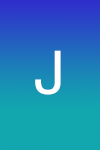
<style>
.page{position:relative;width:100px;height:150px}
.page>*{position:absolute;margin:0}
.t1{font:60px "HelveticaNeue";color:#ffffff}
</style>
<div class="page">
<p class="t1" style="left:35px;top:50px;width:26px;height:45px">J</p>
</div>
